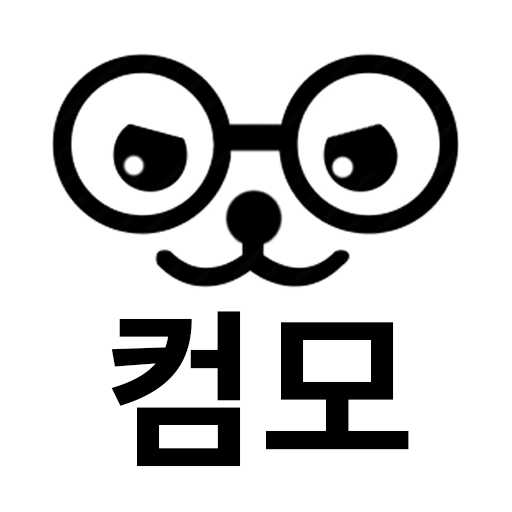
<style>
.page{position:relative;width:512px;height:512px;background:#ffffff}
.page>*{position:absolute;margin:0}
.t1{font:170px "NotoSansKR-Bold";color:#000000}
</style>
<div class="page">
<p class="t1" style="left:111px;top:311px;width:298px;height:156px">컴모</p>
</div>
